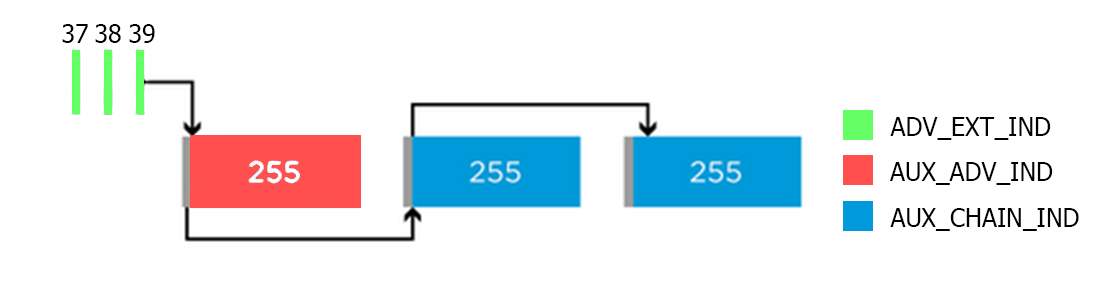
<style>
.page{position:relative;width:1100px;height:290px;background:#ffffff}
.page>*{position:absolute;margin:0}
.t1{font:25px "Tahoma";color:#000000}
</style>
<div class="page">
<p class="t1" style="left:62px;top:24px;width:26px;height:19px">37</p>
<p class="t1" style="left:95px;top:24px;width:26px;height:19px">38</p>
<p class="t1" style="left:129px;top:24px;width:26px;height:19px">39</p>
<p class="t1" style="left:890px;top:117px;width:161px;height:23px">ADV_EXT_IND</p>
<p class="t1" style="left:890px;top:162px;width:163px;height:23px">AUX_ADV_IND</p>
<p class="t1" style="left:890px;top:208px;width:189px;height:23px">AUX_CHAIN_IND</p>
</div>
